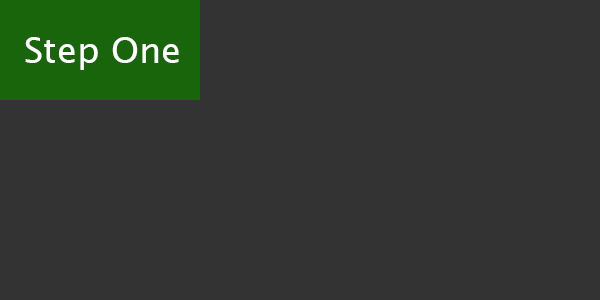
<style>
.page{position:relative;width:600px;height:300px;background:#333333}
.page>*{position:absolute;margin:0}
.t1{font:36px "LucidaSansUnicode";color:#ffffff}
</style>
<div class="page">
<p class="t1" style="left:25px;top:37px;width:154px;height:33px">Step One</p>
</div>
